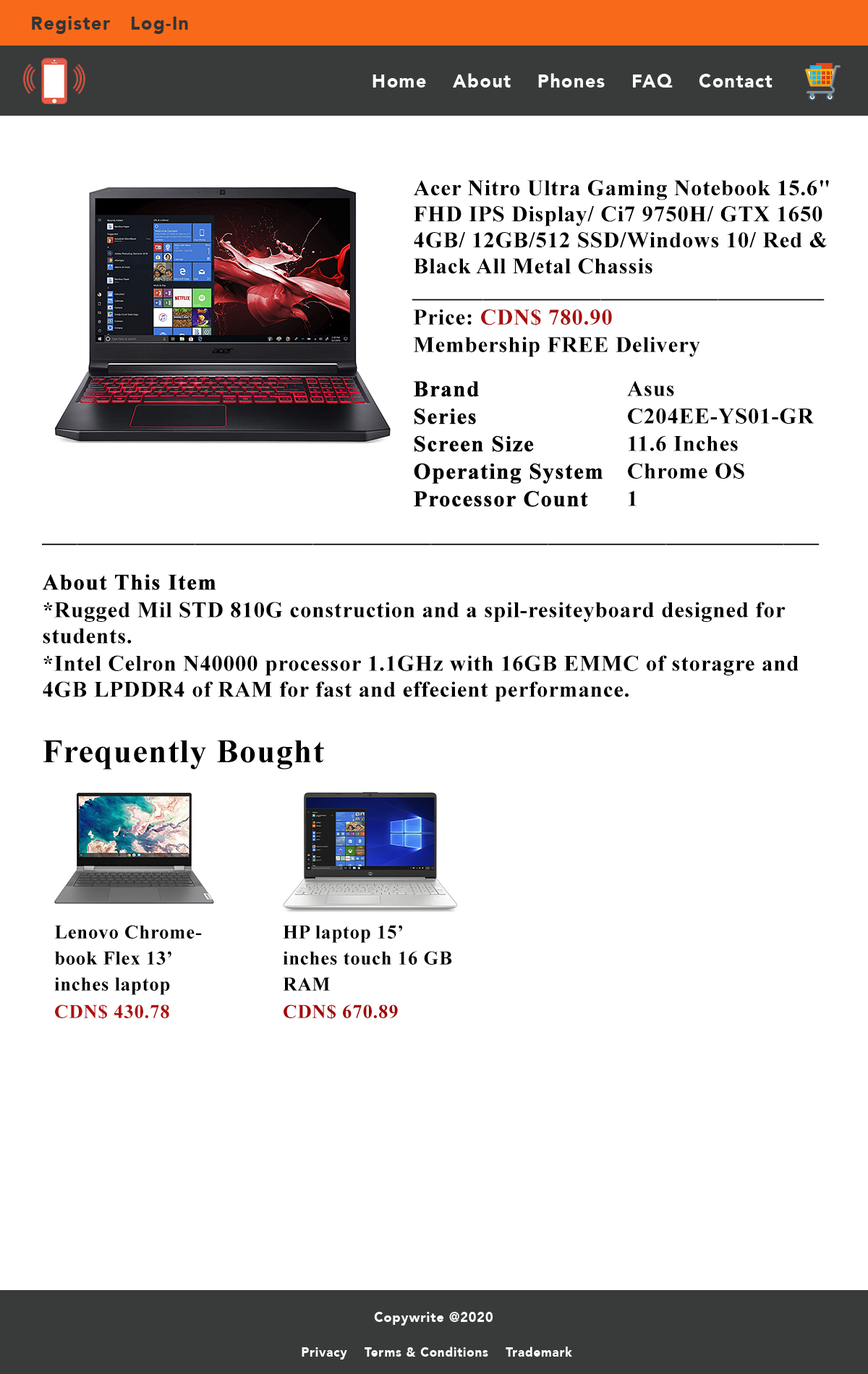
<style>
.page{position:relative;width:868px;height:1374px;background:#ffffff}
.page>*{position:absolute;margin:0}
.t1{font:19.1px "Avenir-Black";letter-spacing:0.05em;color:#333435;scale:0.96 1}
.t2{font:19.1px "Avenir-Black";letter-spacing:0.05em;color:#fbfcfc;scale:0.96 1}
.t3{font:22.2px/26px "TimesNewRomanPS-BoldMT";letter-spacing:0.025em;color:#000000}
.t4{font:22.2px "TimesNewRomanPS-BoldMT";letter-spacing:0.025em;color:#000000}
.t5{font:22.2px/26px "TimesNewRomanPS-BoldMT";letter-spacing:0.025em;color:#a81010}
.t6{font:22.2px/26px "TimesNewRomanPS-BoldMT";letter-spacing:0.025em;color:#000000;font-weight:bold}
.t7{font:32.9px "TimesNewRomanPS-BoldMT";letter-spacing:0.025em;color:#000000}
.t8{font:19.3px/26px "TimesNewRomanPS-BoldMT";letter-spacing:0.025em;color:#000000}
.t9{font:19.3px/26px "TimesNewRomanPS-BoldMT";letter-spacing:0.025em;color:#b00e0e}
.t10{font:19.3px/26px "TimesNewRomanPS-BoldMT";letter-spacing:0.025em;color:#a20606}
.t11{font:13.5px "Avenir-Black";letter-spacing:0.05em;color:#fcfdfd;scale:0.96 1}
.t12{font:12.7px "Avenir-Black";letter-spacing:0.05em;color:#fcfdfd;scale:0.96 1}
</style>
<div class="page">
<p class="t1" style="left:32px;top:16px;width:156px;height:18px">Register   Log-In</p>
<p class="t2" style="left:372px;top:73px;width:400px;height:15px">Home    About    Phones    FAQ    Contact</p>
<p class="t3" style="left:413px;top:180px;width:416px;height:94px">Acer Nitro Ultra Gaming Notebook 15.6" FHD IPS Display/ Ci7 9750H/ GTX 1650 4GB/ 12GB/512 SSD/Windows 10/ Red &amp; Black All Metal Chassis</p>
<p class="t4" style="left:411px;top:299px;width:413px;height:2px">___________________________________</p>
<p class="t3" style="left:413px;top:309px;width:287px;height:48px">Price: <span class="t5">CDN$ 780.90</span> <br>Membership FREE Delivery</p>
<p class="t6" style="left:414px;top:381px;width:188px;height:126px">Brand<br>Series<br>Screen Size<br>Operating System<br>Processor Count</p>
<p class="t3" style="left:627px;top:380px;width:187px;height:126px">Asus<br>C204EE-YS01-GR<br>11.6 Inches<br>Chrome OS<br>1</p>
<p class="t4" style="left:42px;top:543px;width:777px;height:2px">__________________________________________________________________</p>
<p class="t3" style="left:42px;top:574px;width:756px;height:127px"><span class="t6">About This Item<br></span>*Rugged Mil STD 810G construction and a spil-resiteyboard designed for students.<br>*Intel Celron N40000 processor 1.1GHz with 16GB EMMC of storagre and 4GB LPDDR4 of RAM for fast and effecient performance.</p>
<p class="t7" style="left:43px;top:740px;width:281px;height:29px">Frequently Bought</p>
<p class="t8" style="left:54px;top:925px;width:148px;height:95px">Lenovo Chromebook Flex 13’ inches laptop<br><span class="t9">CDN$ 430.78</span></p>
<p class="t8" style="left:283px;top:925px;width:169px;height:95px">HP laptop 15’ inches touch 16 GB RAM <br><span class="t10">CDN$ 670.89</span></p>
<p class="t11" style="left:374px;top:1312px;width:119px;height:14px">Copywrite @2020</p>
<p class="t12" style="left:302px;top:1347px;width:270px;height:13px">Privacy    Terms &amp; Conditions    Trademark</p>
</div>
